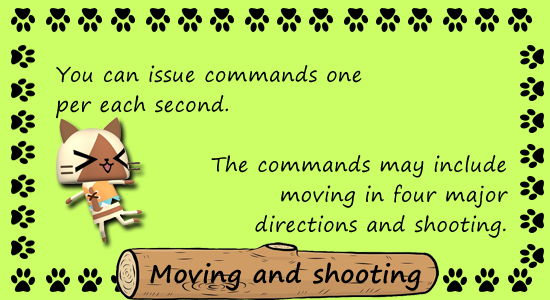
<style>
.page{position:relative;width:550px;height:300px;background:#ccff66}
.page>*{position:absolute;margin:0}
.t1{font:20px/30px "SegoePrint";letter-spacing:0.025em;color:#000000}
.t2{font:25px "SegoePrint-Bold";letter-spacing:0.025em;color:#000000}
</style>
<div class="page">
<p class="t1" style="left:56px;top:65px;width:452px;height:173px">You can issue commands one <br>per each second.<br><br>The commands may include <br>moving in four major <br>directions and shooting.</p>
<p class="t2" style="left:150px;top:262px;width:271px;height:29px">Moving and shooting</p>
</div>
